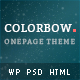
<style>
.page{position:relative;width:80px;height:80px}
.page>*{position:absolute;margin:0}
.t1{font:11px "Bitter-Regular";letter-spacing:0.05em;color:#ffffff;text-transform:uppercase}
.t2{font:7px "Bitter-Regular";letter-spacing:0.13em;text-transform:uppercase}
.t3{font:8px "PTSans-Narrow";letter-spacing:0.085em;color:#ffffff;scale:1.25 1}
</style>
<div class="page">
<p class="t1" style="left:4px;top:24px;width:68px;height:8px">Colorbow</p>
<p class="t2" style="left:4px;top:38px;width:71px;height:7px">onepage theme</p>
<p class="t3" style="left:9px;top:69px;width:61px;height:6px">WP  PSD  HTML</p>
</div>
